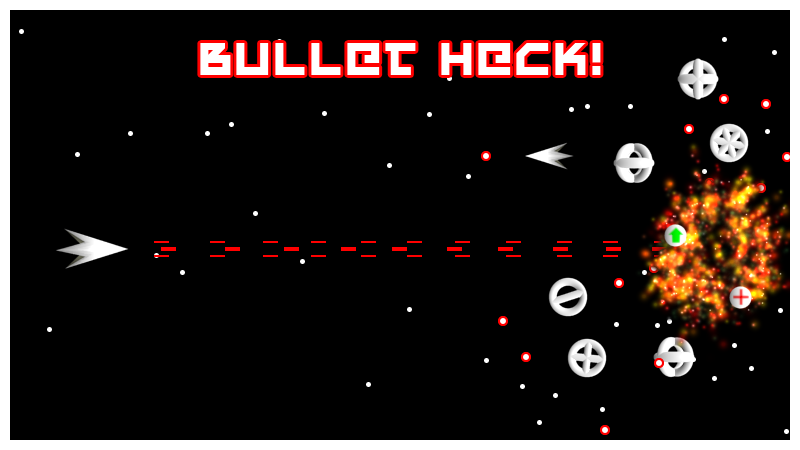
<style>
.page{position:relative;width:800px;height:450px;background:#000000}
.page>*{position:absolute;margin:0}
.t1{font:48px "UnoEstado";color:#ffffff}
</style>
<div class="page">
<p class="t1" style="left:200px;top:43px;width:401px;height:32px">bULLET hECK!</p>
</div>
